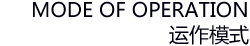
<style>
.page{position:relative;width:250px;height:46px;background:#ffffff}
.page>*{position:absolute;margin:0}
.t1{font:20px "MicrosoftYaHei";color:#000011}
</style>
<div class="page">
<p class="t1" style="left:33px;top:1px;width:214px;height:17px">MODE OF OPERATION</p>
<p class="t1" style="left:169px;top:25px;width:80px;height:20px">运作模式</p>
</div>
